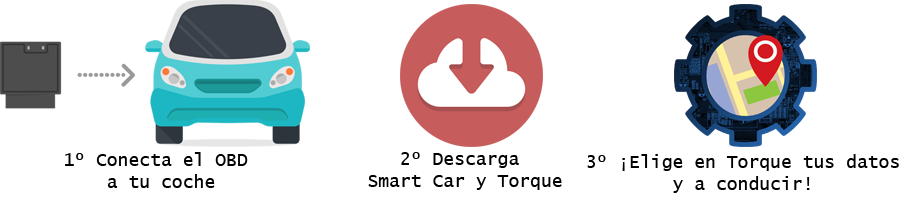
<style>
.page{position:relative;width:900px;height:200px;background:#ffffff}
.page>*{position:absolute;margin:0}
.t1{font:18px "LucidaConsole";color:#000000}
</style>
<div class="page">
<p class="t1" style="left:65px;top:152px;width:183px;height:36px;text-align:center">1º Conecta el OBD <br>a tu coche</p>
<p class="t1" style="left:368px;top:152px;width:194px;height:38px;text-align:center">2º Descarga <br>Smart Car y Torque</p>
<p class="t1" style="left:587px;top:154px;width:312px;height:39px;text-align:center">3º ¡Elige en Torque tus datos<br>y a conducir!</p>
</div>
